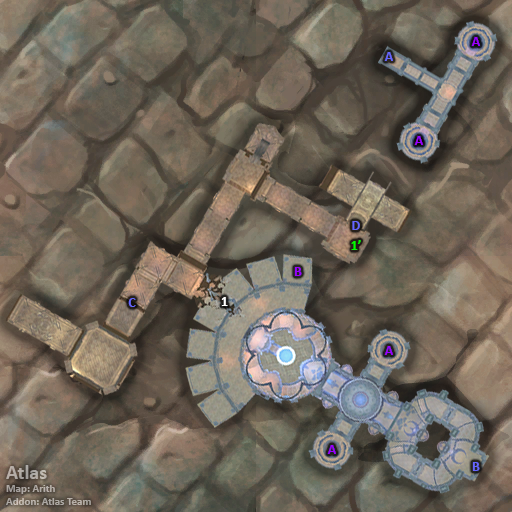
<style>
.page{position:relative;width:512px;height:512px}
.page>*{position:absolute;margin:0}
.t1{font:14px "Calibri-Bold";color:#9900ff}
.t2{font:14px "Calibri-Bold";color:#6666ff}
.t3{font:14px "Calibri-Bold";color:#00ff00}
.t4{font:14px "Calibri-Bold";color:#ffffff}
.t5{font:11px "Calibri-Bold";color:#b3aca6}
.t6{font:20px "Calibri-Bold";color:#b3aca6}
</style>
<div class="page">
<p class="t1" style="left:471px;top:37px;width:9px;height:9px">A</p>
<p class="t2" style="left:384px;top:52px;width:9px;height:9px">A</p>
<p class="t1" style="left:414px;top:136px;width:9px;height:9px">A</p>
<p class="t2" style="left:352px;top:221px;width:8px;height:9px">D</p>
<p class="t3" style="left:351px;top:240px;width:10px;height:10px">1’</p>
<p class="t1" style="left:294px;top:267px;width:8px;height:9px">B</p>
<p class="t2" style="left:128px;top:298px;width:8px;height:9px">C</p>
<p class="t4" style="left:221px;top:297px;width:7px;height:9px">1</p>
<p class="t1" style="left:384px;top:346px;width:9px;height:9px">A</p>
<p class="t1" style="left:327px;top:445px;width:9px;height:9px">A</p>
<p class="t2" style="left:472px;top:462px;width:8px;height:9px">B</p>
<p class="t5" style="left:6px;top:465px;width:85px;height:40px"><span class="t6">Atlas<br></span>Map: Arith<br>Addon: Atlas Team</p>
</div>
